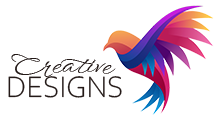
<style>
.page{position:relative;width:220px;height:116px;background:#ffffff}
.page>*{position:absolute;margin:0}
.t1{font:26.5px "WindSong-Regular";color:#231917}
.t2{font:31px "CorbelLight";color:#231917}
</style>
<div class="page">
<p class="t1" style="left:11px;top:54px;width:95px;height:23px">Creativ</p>
<p class="t1" style="left:102px;top:65px;width:14px;height:9px">e</p>
<p class="t2" style="left:8px;top:76px;width:114px;height:22px">DESIGNS</p>
</div>
